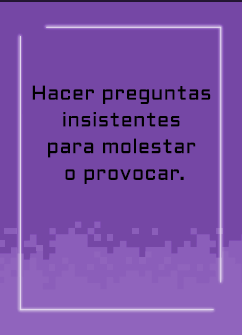
<style>
.page{position:relative;width:242px;height:335px;background:#7547a5}
.page>*{position:absolute;margin:0}
.t1{font:20px/26.7px "Aldrich-Regular";letter-spacing:0.025em;color:#000000}
</style>
<div class="page">
<p class="t1" style="left:32px;top:85px;width:179px;height:99px;text-align:center">Hacer preguntas <br>insistentes <br>para molestar <br>o provocar.</p>
</div>
